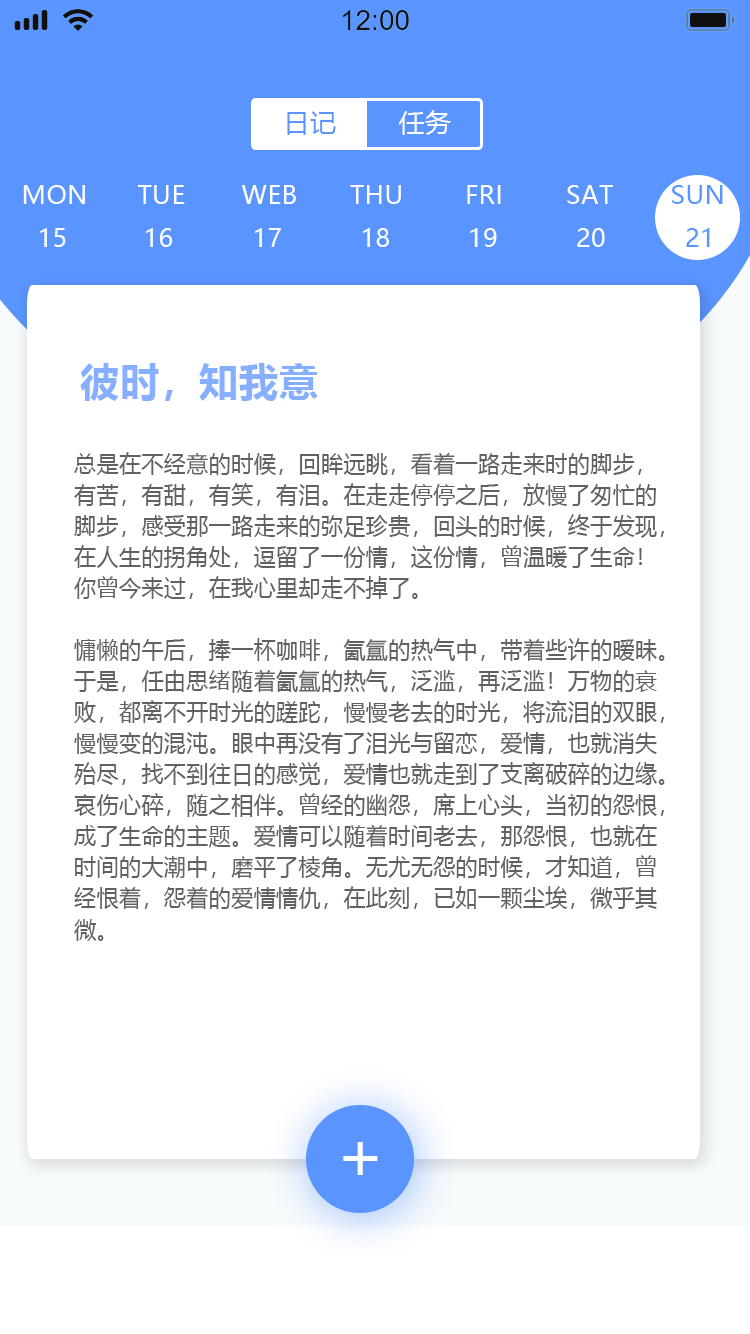
<style>
.page{position:relative;width:750px;height:1334px;background:#ffffff}
.page>*{position:absolute;margin:0}
.t1{font:26px "MicrosoftYaHei";letter-spacing:0.02em;color:#5a95ff}
.t2{font:26px "MicrosoftYaHei";letter-spacing:0.02em;color:#ffffff}
.t3{font:25px "MicrosoftYaHei";letter-spacing:0.02em;color:#ffffff}
.t4{font:40.2px "MicrosoftYaHei-Bold";letter-spacing:0.02em;color:#87afff}
.t5{font:22.7px/31.1px "MicrosoftYaHei";letter-spacing:0.02em;color:#616161}
</style>
<div class="page">
<p class="t1" style="left:287px;top:111px;width:49px;height:24px">日记</p>
<p class="t2" style="left:399px;top:110px;width:52px;height:25px">任务</p>
<p class="t3" style="left:23px;top:185px;width:62px;height:19px">MON</p>
<p class="t3" style="left:138px;top:185px;width:47px;height:19px">TUE</p>
<p class="t3" style="left:241px;top:185px;width:55px;height:19px">WEB</p>
<p class="t3" style="left:350px;top:185px;width:51px;height:19px">THU</p>
<p class="t3" style="left:467px;top:185px;width:34px;height:19px">FRI</p>
<p class="t3" style="left:567px;top:185px;width:46px;height:19px">SAT</p>
<p class="t3" style="left:40px;top:228px;width:26px;height:19px">15</p>
<p class="t3" style="left:146px;top:228px;width:27px;height:19px">16</p>
<p class="t3" style="left:255px;top:228px;width:26px;height:19px">17</p>
<p class="t3" style="left:363px;top:228px;width:26px;height:19px">18</p>
<p class="t3" style="left:470px;top:228px;width:27px;height:19px">19</p>
<p class="t3" style="left:577px;top:228px;width:28px;height:19px">20</p>
<p class="t4" style="left:80px;top:363px;width:238px;height:38px">彼时，知我意</p>
<p class="t5" style="left:74px;top:452px;width:591px;height:489px">总是在不经意的时候，回眸远眺，看着一路走来时的脚步，<br>有苦，有甜，有笑，有泪。在走走停停之后，放慢了匆忙的<br>脚步，感受那一路走来的弥足珍贵，回头的时候，终于发现，<br>在人生的拐角处，逗留了一份情，这份情，曾温暖了生命！<br>你曾今来过，在我心里却走不掉了。<br><br>慵懒的午后，捧一杯咖啡，氤氲的热气中，带着些许的暧昧。<br>于是，任由思绪随着氤氲的热气，泛滥，再泛滥！万物的衰<br>败，都离不开时光的蹉跎，慢慢老去的时光，将流泪的双眼，<br>慢慢变的混沌。眼中再没有了泪光与留恋，爱情，也就消失<br>殆尽，找不到往日的感觉，爱情也就走到了支离破碎的边缘。<br>哀伤心碎，随之相伴。曾经的幽怨，席上心头，当初的怨恨，<br>成了生命的主题。爱情可以随着时间老去，那怨恨，也就在<br>时间的大潮中，磨平了棱角。无尤无怨的时候，才知道，曾<br>经恨着，怨着的爱情情仇，在此刻，已如一颗尘埃，微乎其<br>微。</p>
</div>
